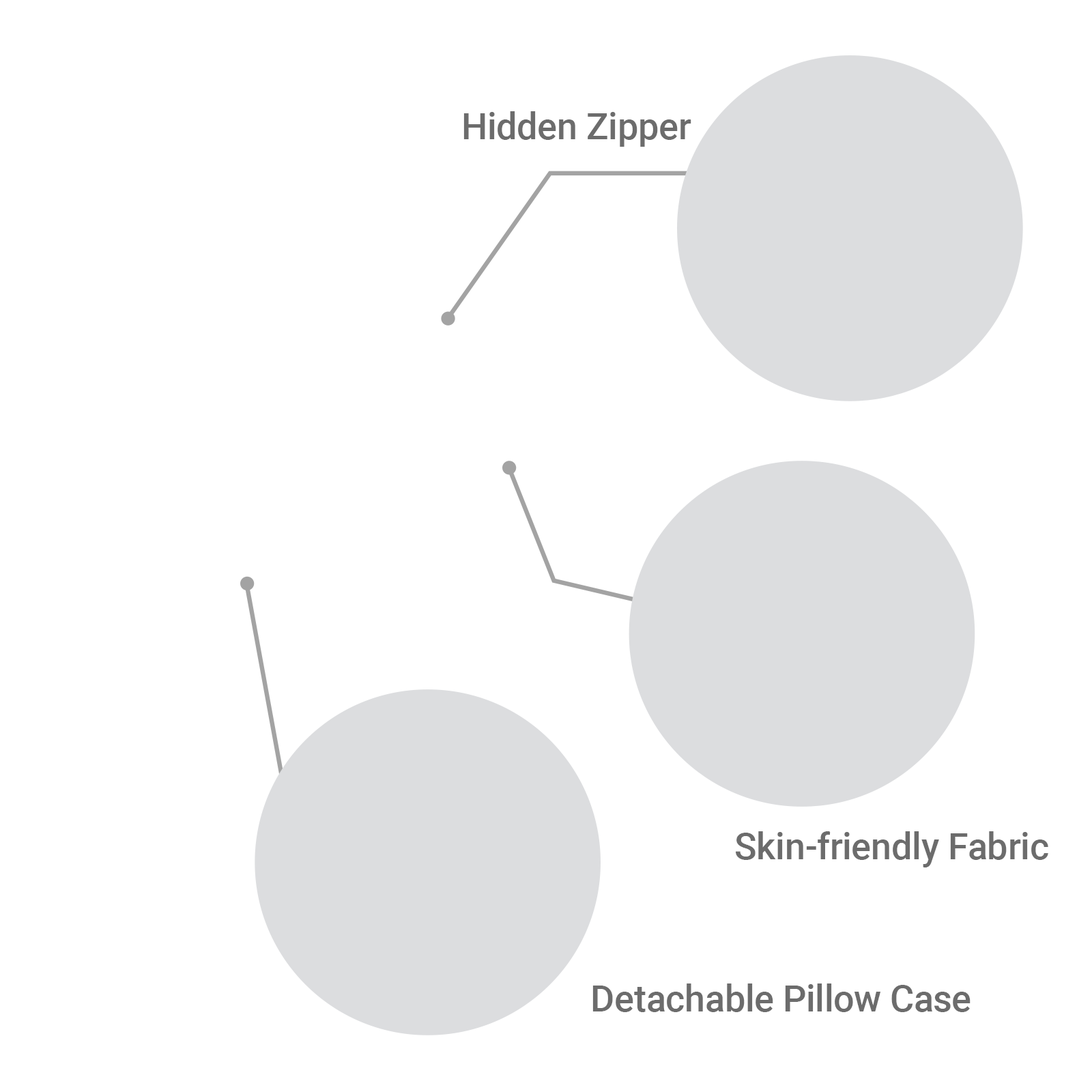
<style>
.page{position:relative;width:1092px;height:1092px;background:#ffffff}
.page>*{position:absolute;margin:0}
.t1{font:36.5px "Roboto-Medium";color:#6c6c6c}
</style>
<div class="page">
<p class="t1" style="left:463px;top:111px;width:228px;height:36px">Hidden Zipper</p>
<p class="t1" style="left:736px;top:831px;width:312px;height:36px">Skin-friendly Fabric</p>
<p class="t1" style="left:592px;top:983px;width:379px;height:29px">Detachable Pillow Case</p>
</div>
